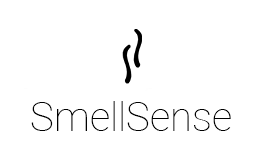
<style>
.page{position:relative;width:267px;height:158px;background:#ffffff}
.page>*{position:absolute;margin:0}
.t1{font:40px "Roboto-Thin";color:#000000}
</style>
<div class="page">
<p class="t1" style="left:31px;top:101px;width:200px;height:30px">SmellSense</p>
</div>
